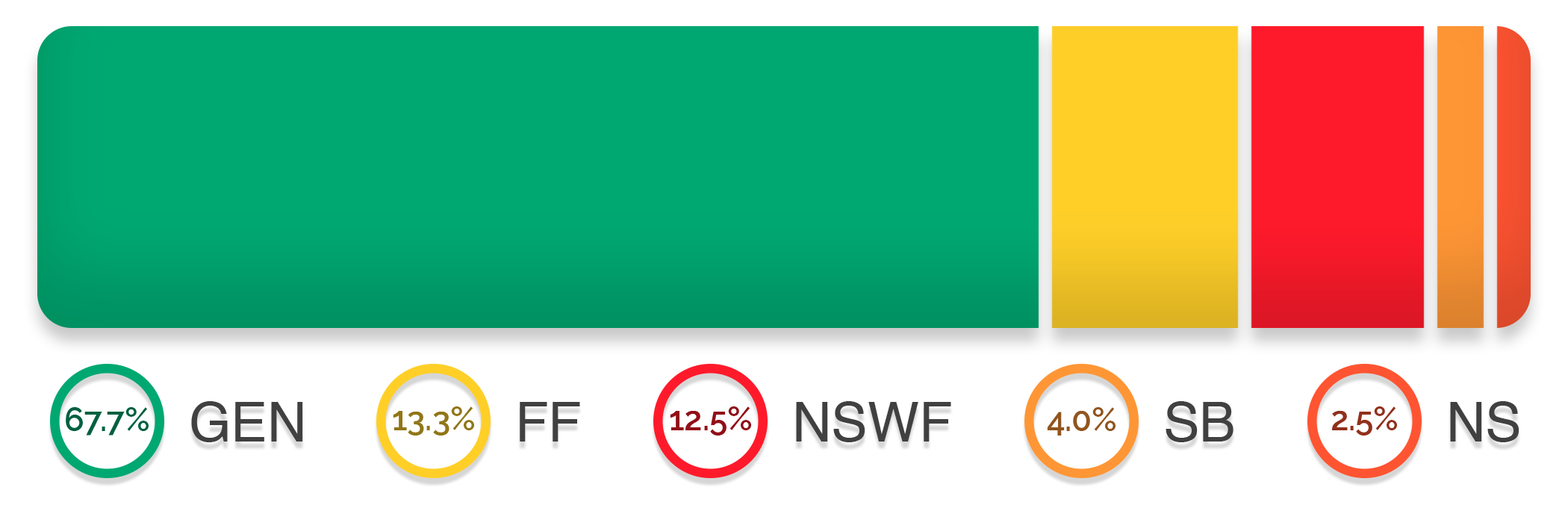
<style>
.page{position:relative;width:1568px;height:508px;background:#ffffff}
.page>*{position:absolute;margin:0}
.t1{font:93.3px "Helvetica";color:#404040}
.t2{font:56px "Raleway-SemiBold";color:#006040}
.t3{font:56px "Raleway-SemiBold";color:#917617}
.t4{font:56px "Raleway-SemiBold";color:#910f18}
.t5{font:56px "Raleway-SemiBold";color:#91551e}
.t6{font:56px "Raleway-SemiBold";color:#91301c}
</style>
<div class="page">
<p class="t1" style="left:191px;top:401px;width:112px;height:41px">GEN</p>
<p class="t1" style="left:520px;top:402px;width:60px;height:39px">FF</p>
<p class="t1" style="left:796px;top:401px;width:155px;height:41px">NSWF</p>
<p class="t1" style="left:1166px;top:401px;width:67px;height:41px">SB</p>
<p class="t1" style="left:1450px;top:401px;width:69px;height:41px">NS</p>
<p class="t2" style="left:66px;top:407px;width:83px;height:28px">67.7%</p>
<p class="t3" style="left:393px;top:406px;width:81px;height:29px">13.3%</p>
<p class="t4" style="left:670px;top:406px;width:81px;height:29px">12.5%</p>
<p class="t5" style="left:1047px;top:407px;width:69px;height:28px">4.0%</p>
<p class="t6" style="left:1332px;top:406px;width:65px;height:29px">2.5%</p>
</div>
